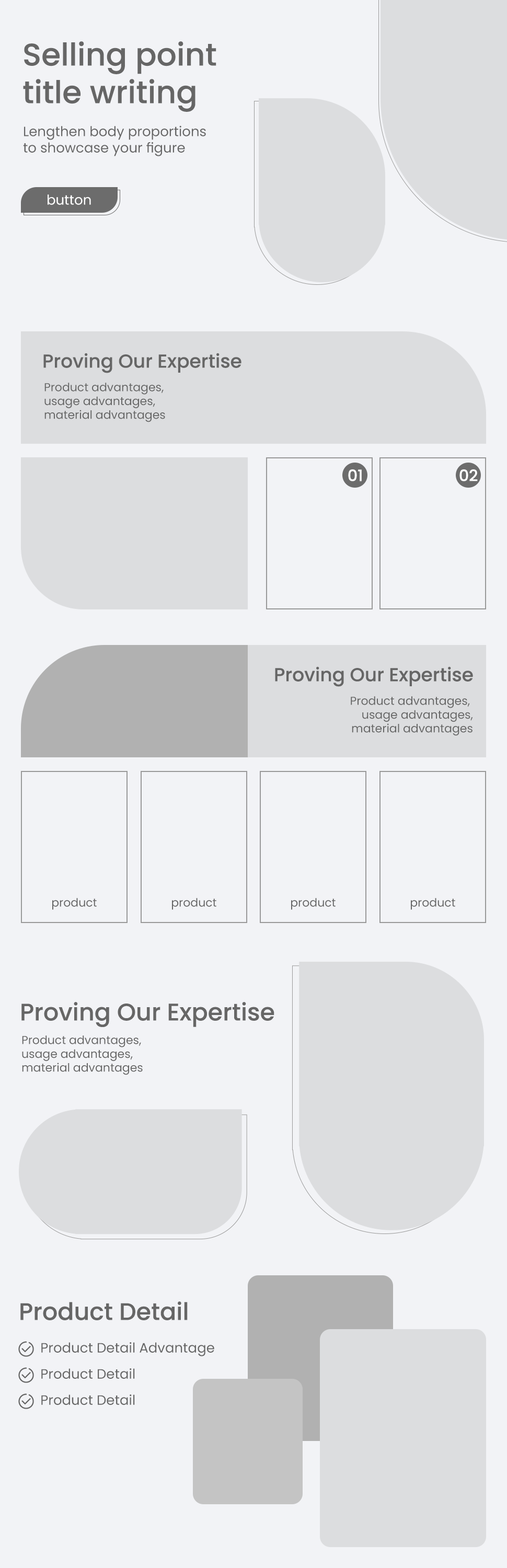
<style>
.page{position:relative;width:507px;height:1568px;background:#f2f3f6}
.page>*{position:absolute;margin:0}
.t1{font:31.4px "Poppins-Medium";color:#666666}
.t2{font:13.6px "Poppins-Regular";color:#666666}
.t3{font:13.6px "Poppins-Regular";color:#ffffff}
.t4{font:18.8px "Poppins-Medium";color:#666666}
.t5{font:11.5px "Poppins-Regular";color:#666666}
.t6{font:15.7px "Poppins-Medium";color:#ffffff}
.t7{font:24px "Poppins-Medium";color:#666666}
</style>
<div class="page">
<p class="t1" style="left:23px;top:41px;width:193px;height:71px">Selling point<br>title writing</p>
<p class="t2" style="left:23px;top:125px;width:183px;height:31px">Lengthen body proportions<br>to showcase your figure</p>
<p class="t3" style="left:48px;top:194px;width:43px;height:11px">button</p>
<p class="t4" style="left:43px;top:353px;width:198px;height:20px">Proving Our Expertise</p>
<p class="t5" style="left:44px;top:383px;width:121px;height:39px">Product advantages, <br>usage advantages,<br>material advantages</p>
<p class="t6" style="left:348px;top:469px;width:14px;height:12px">01</p>
<p class="t6" style="left:459px;top:469px;width:19px;height:12px">02</p>
<p class="t4" style="left:275px;top:666px;width:198px;height:21px">Proving Our Expertise</p>
<p class="t5" style="left:351px;top:696px;width:122px;height:40px;text-align:right">Product advantages, <br>usage advantages,<br>material advantages</p>
<p class="t5" style="left:52px;top:898px;width:45px;height:12px">product</p>
<p class="t5" style="left:172px;top:898px;width:44px;height:12px">product</p>
<p class="t5" style="left:291px;top:898px;width:45px;height:12px">product</p>
<p class="t5" style="left:411px;top:898px;width:44px;height:12px">product</p>
<p class="t7" style="left:21px;top:1002px;width:253px;height:25px">Proving Our Expertise</p>
<p class="t5" style="left:22px;top:1035px;width:121px;height:40px">Product advantages, <br>usage advantages,<br>material advantages</p>
<p class="t7" style="left:20px;top:1301px;width:168px;height:19px">Product Detail</p>
<p class="t2" style="left:41px;top:1342px;width:173px;height:14px">Product Detail Advantage</p>
<p class="t2" style="left:41px;top:1368px;width:94px;height:11px">Product Detail</p>
<p class="t2" style="left:41px;top:1394px;width:94px;height:11px">Product Detail</p>
</div>
